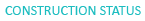
<style>
.page{position:relative;width:145px;height:21px;background:#ffffff}
.page>*{position:absolute;margin:0}
.t1{font:14px "Calibri";color:#1dbdc0}
</style>
<div class="page">
<p class="t1" style="left:5px;top:6px;width:136px;height:9px">CONSTRUCTION STATUS</p>
</div>
